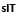
<style>
.page{position:relative;width:16px;height:16px;background:#ffffff}
.page>*{position:absolute;margin:0}
.t1{font:12px "Calibri-Bold";color:#000000}
</style>
<div class="page">
<p class="t1" style="left:1px;top:4px;width:15px;height:8px">sIT</p>
</div>
